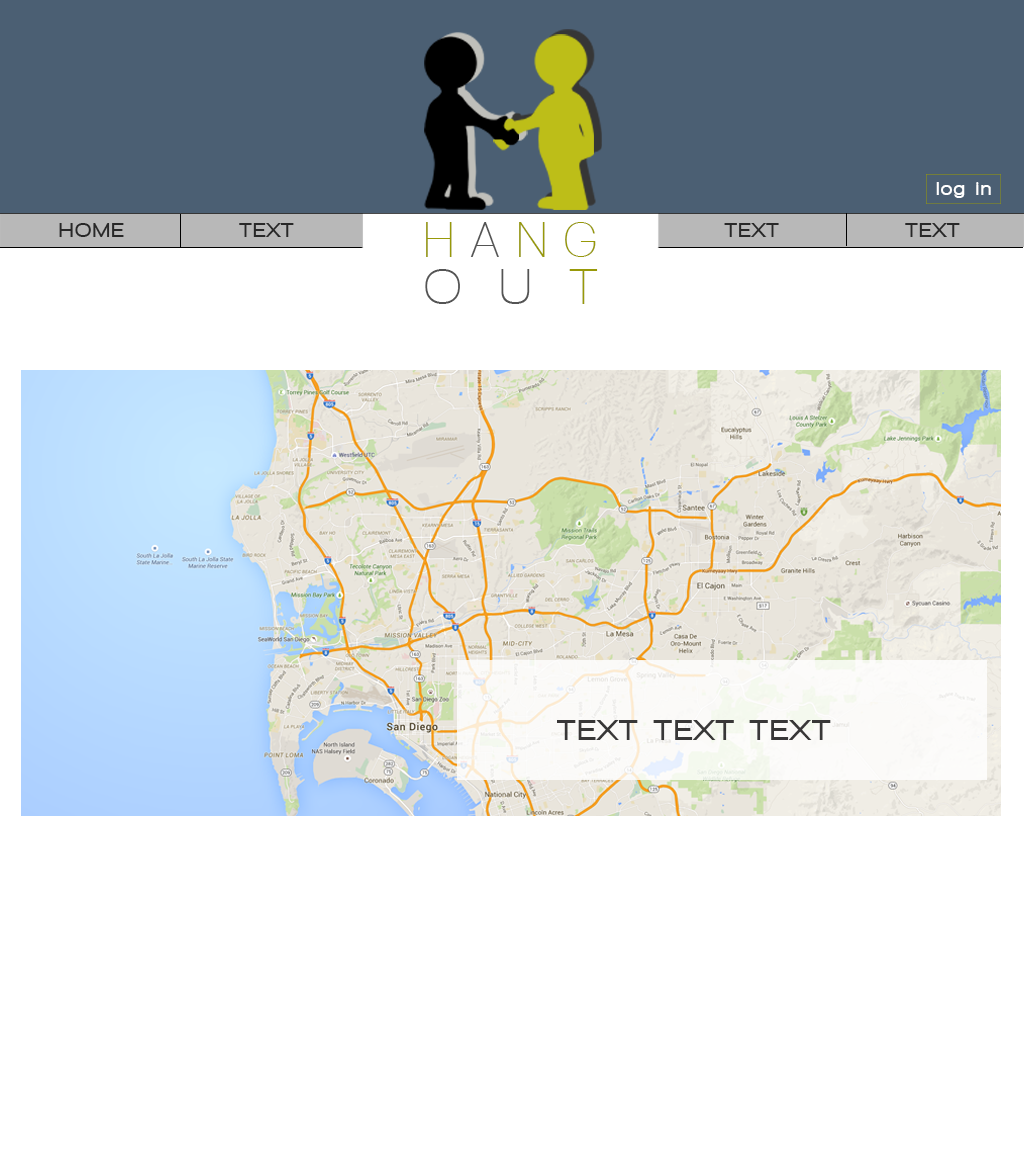
<style>
.page{position:relative;width:1024px;height:1152px;background:#ffffff}
.page>*{position:absolute;margin:0}
.t1{font:19.5px "WalkwayBlack";letter-spacing:0.12em;color:#ffffff}
.t2{font:51.5px "WalkwaySemiBold";letter-spacing:0.4em;color:#989909;scale:0.85 1}
.t3{font:51.5px "WalkwaySemiBold";letter-spacing:0.4em;color:#545454;scale:0.85 1}
.t4{font:20.1px "WalkwayBlack";letter-spacing:0.12em;color:#383737}
.t5{font:51.5px "WalkwaySemiBold";letter-spacing:0.78em;color:#545454;scale:0.95 1}
.t6{font:51.5px "WalkwaySemiBold";letter-spacing:1.12em;color:#989909;scale:0.95 1}
.t7{font:30px "WalkwayBlack";letter-spacing:0.12em;color:#383737}
</style>
<div class="page">
<p class="t1" style="left:936px;top:182px;width:55px;height:16px">log in</p>
<p class="t2" style="left:426px;top:222px;width:170px;height:35px">H<span class="t3">A</span>NG</p>
<p class="t4" style="left:59px;top:223px;width:235px;height:14px">HOME    TEXT</p>
<p class="t4" style="left:724px;top:223px;width:236px;height:14px">TEXT        TEXT</p>
<p class="t5" style="left:425px;top:269px;width:173px;height:35px">OU<span class="t6">T</span></p>
<p class="t7" style="left:557px;top:720px;width:274px;height:20px">TEXT TEXT TEXT</p>
</div>
